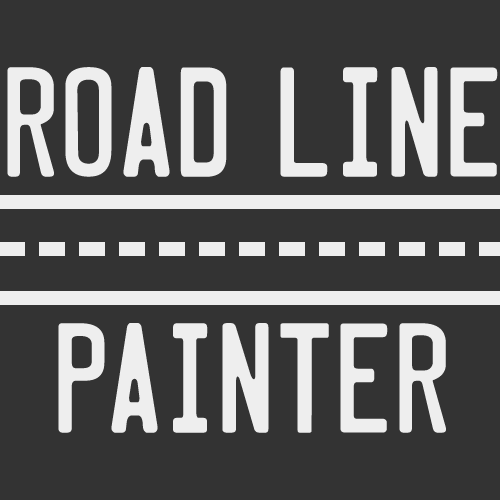
<style>
.page{position:relative;width:500px;height:500px;background:#333333}
.page>*{position:absolute;margin:0}
.t1{font:140px/128px "LicensePlate";color:#eeeeee}
</style>
<div class="page">
<p class="t1" style="left:7px;top:67px;width:491px;height:366px;text-align:center">ROAD LINE<br><br>PAINTER</p>
</div>
